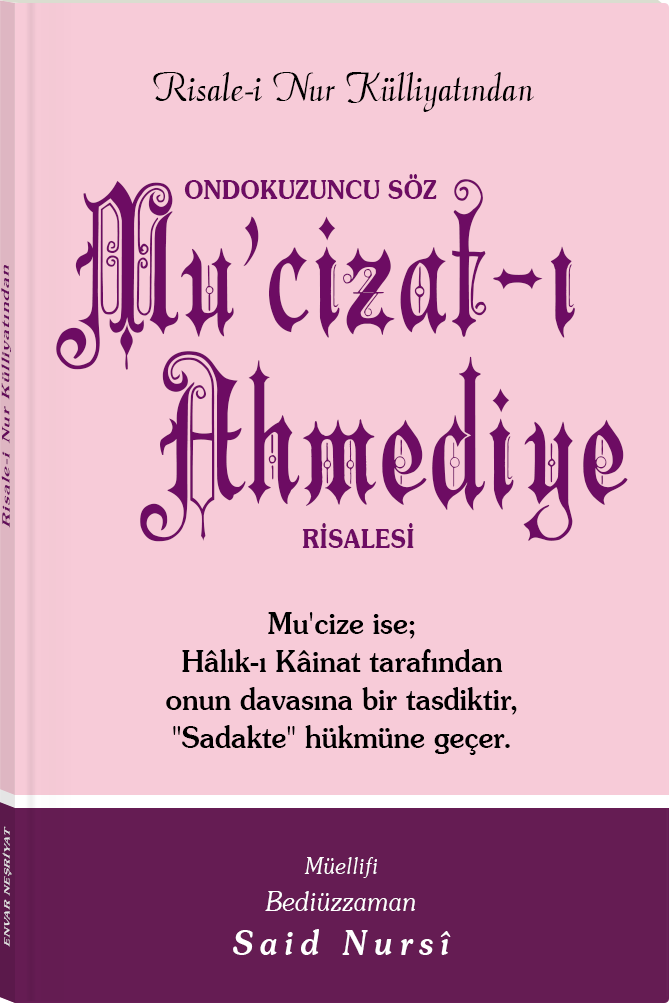
<style>
.page{position:relative;width:669px;height:1003px;background:#f7cbd8}
.page>*{position:absolute;margin:0}
.t1{font:45.3px "Barla © 072 Aria ScriptScriptSSi";color:#000000;scale:0.94 1}
.t2{font:25.2px "SouvenirITCbyBT-Demi";color:#6d0c63;scale:0.91 1}
.t3{font:192.7px/171.9px "Barla © 001 Liva Nur";letter-spacing:-0.001em;color:#6d0c63;scale:0.92 1}
.t4{font:11.4px "Souvenir-Medium";letter-spacing:0.08em;color:#6d0c63;scale:1.65 1}
.t5{font:30.3px/38px "Souvenir-Medium";color:#000000;scale:0.92 1}
.t6{font:8.3px "Souvenir-Medium";letter-spacing:0.08em;color:#e5e5e5;scale:1.43 1}
.t7{font:27.1px/37.8px "Souvenir-LightItalic";color:#ffffff;scale:0.92 1}
.t8{font:22.8px/39.8px "Souvenir-LightItalic";color:#ffffff;scale:0.92 1}
.t9{font:33.9px/43.8px "Souvenir-MediumItalic";letter-spacing:0.2em;color:#ffffff;scale:0.92 1}
</style>
<div class="page">
<p class="t1" style="left:153px;top:72px;width:381px;height:40px">Risale-i Nur Külliyatından</p>
<p class="t2" style="left:184px;top:174px;width:253px;height:25px">ONDOKUZUNCU SÖZ</p>
<p class="t3" style="left:56px;top:179px;width:572px;height:363px;text-align:center">Mu’cizat-ı<br>    Ahmediye</p>
<p class="t4" style="left:1px;top:265px;width:10px;height:263px;rotate:-90deg">Risale-i Nur Külliyatından</p>
<p class="t2" style="left:302px;top:523px;width:112px;height:25px">RİSALESİ</p>
<p class="t5" style="left:166px;top:612px;width:351px;height:143px;text-align:center">Mu'cize ise;<br>Hâlık-ı Kâinat tarafından<br>onun davasına bir tasdiktir,<br>"Sadakte" hükmüne geçer.</p>
<p class="t6" style="left:2px;top:826px;width:10px;height:121px;rotate:-90deg">ENVAR NEŞRİYAT</p>
<p class="t7" style="left:233px;top:857px;width:218px;height:98px;text-align:center"><span class="t8">Müellifi<br></span>Bediüzzaman<br><span class="t9">Said Nursî</span></p>
</div>
